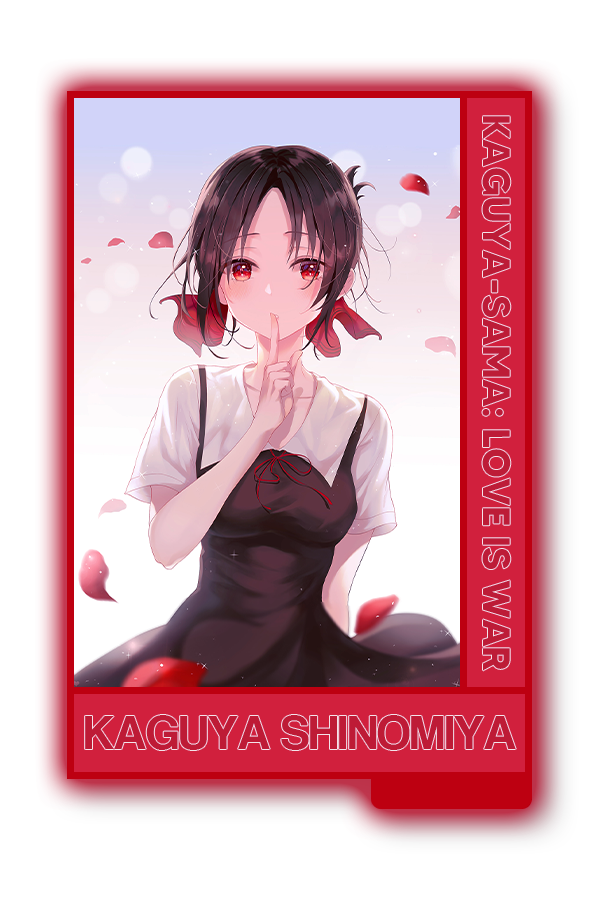
<style>
.page{position:relative;width:600px;height:900px;background:#ffffff}
.page>*{position:absolute;margin:0}
.t1{font:38.3px "MADETOMMY-Bold";color:#c12731}
.t2{font:49.6px "CoolveticaRg-Regular";color:#c22630}
</style>
<div class="page">
<p class="t1" style="left:482px;top:116px;width:29px;height:555px;rotate:90deg">KAGUYA-SAMA: LOVE IS WAR</p>
<p class="t2" style="left:85px;top:715px;width:431px;height:35px">KAGUYA SHINOMIYA</p>
</div>
